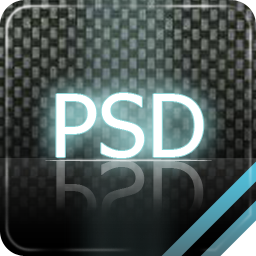
<style>
.page{position:relative;width:256px;height:256px}
.page>*{position:absolute;margin:0}
.t1{font:87.1px "Tahoma";color:#ffffff;text-transform:uppercase}
</style>
<div class="page">
<p class="t1" style="left:56px;top:93px;width:148px;height:65px">psd</p>
</div>
